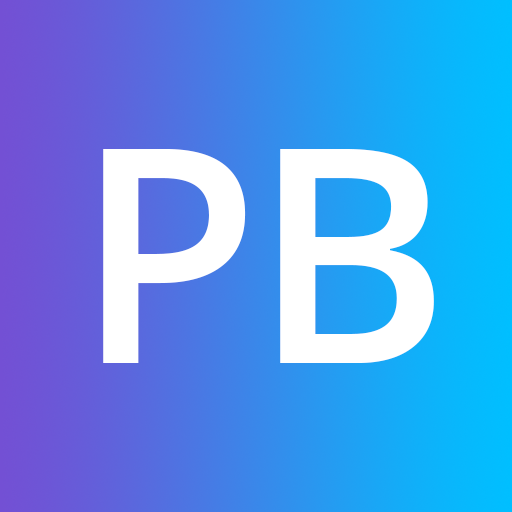
<style>
.page{position:relative;width:512px;height:512px}
.page>*{position:absolute;margin:0}
.t1{font:300px "OpenSans-Semibold";letter-spacing:-0.025em;color:#ffffff}
</style>
<div class="page">
<p class="t1" style="left:103px;top:149px;width:331px;height:214px">PB</p>
</div>
